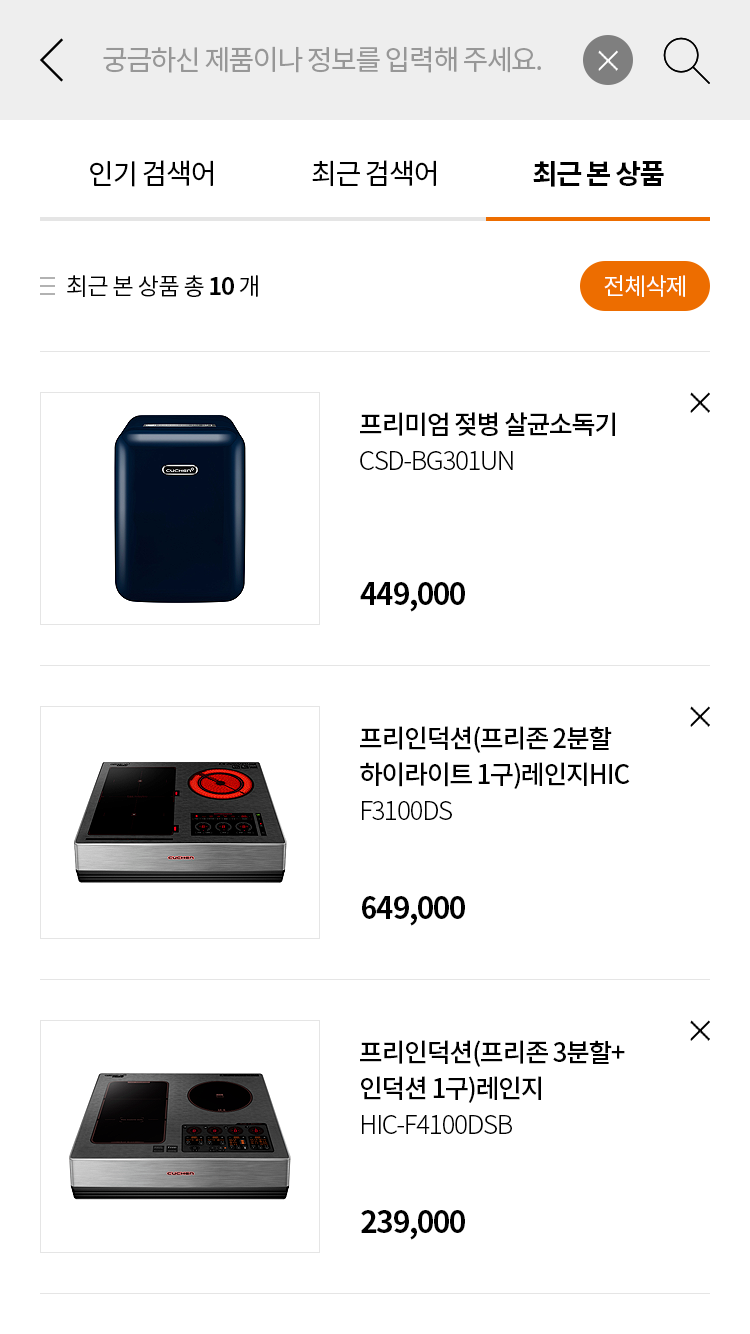
<style>
.page{position:relative;width:750px;height:1334px;background:#ffffff}
.page>*{position:absolute;margin:0}
.t1{font:28px "NotoSansCJKkr-Regular";letter-spacing:-0.05em;color:#979797}
.t2{font:28px "NotoSansCJKkr-Regular";letter-spacing:-0.05em;color:#000000}
.t3{font:28px "NotoSansCJKkr-Bold";letter-spacing:-0.05em;color:#000000}
.t4{font:24px "NotoSansCJKkr-Regular";letter-spacing:-0.05em;color:#000000}
.t5{font:24px "NotoSansCJKkr-Bold";letter-spacing:-0.05em;color:#000000}
.t6{font:24px "NotoSansCJKkr-Regular";letter-spacing:-0.05em;color:#ffffff}
.t7{font:26px/36px "NotoSansCJKkr-Medium";letter-spacing:-0.05em;color:#000000}
.t8{font:26px/36px "NotoSansCJKkr-Light";letter-spacing:-0.05em;color:#000000}
.t9{font:30px "NotoSansCJKkr-Bold";letter-spacing:-0.05em;color:#000000}
</style>
<div class="page">
<p class="t1" style="left:103px;top:46px;width:438px;height:27px">궁금하신 제품이나 정보를 입력해 주세요.</p>
<p class="t2" style="left:90px;top:160px;width:123px;height:27px">인기 검색어</p>
<p class="t2" style="left:312px;top:160px;width:124px;height:27px">최근 검색어</p>
<p class="t3" style="left:533px;top:161px;width:131px;height:26px">최근 본 상품</p>
<p class="t4" style="left:67px;top:275px;width:191px;height:22px">최근 본 상품 총 <span class="t5">10</span> 개</p>
<p class="t6" style="left:604px;top:275px;width:81px;height:22px">전체삭제</p>
<p class="t7" style="left:360px;top:412px;width:255px;height:58px">프리미엄 젖병 살균소독기<br><span class="t8">CSD-BG301UN</span></p>
<p class="t9" style="left:360px;top:582px;width:105px;height:30px">449,000</p>
<p class="t7" style="left:360px;top:726px;width:270px;height:94px">프리인덕션(프리존 2분할 <br>하이라이트 1구)레인지HIC<br><span class="t8">F3100DS</span></p>
<p class="t9" style="left:362px;top:896px;width:103px;height:30px">649,000</p>
<p class="t7" style="left:360px;top:1040px;width:265px;height:94px">프리인덕션(프리존 3분할+<br>인덕션 1구)레인지<br><span class="t8">HIC-F4100DSB</span></p>
<p class="t9" style="left:361px;top:1210px;width:104px;height:30px">239,000</p>
</div>
